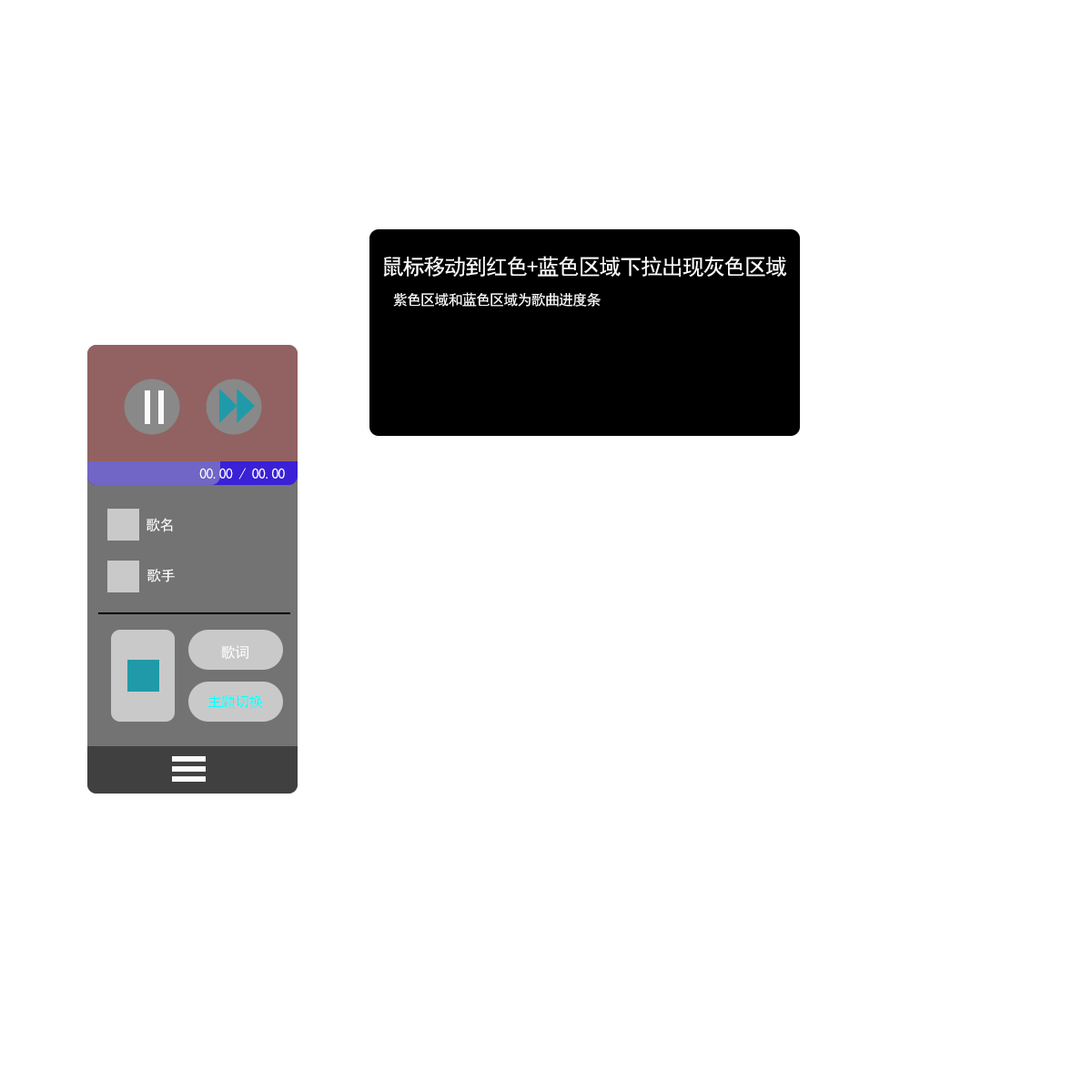
<style>
.page{position:relative;width:1092px;height:1092px;background:#ffffff}
.page>*{position:absolute;margin:0}
.t1{font:21.8px "SimHei";letter-spacing:-0.05em;color:#fdfdfd}
.t2{font:14.6px "SimHei";letter-spacing:-0.05em;color:#fdfdfd}
.t3{font:14.6px "SimHei";letter-spacing:-0.05em;color:#00ffff}
</style>
<div class="page">
<p class="t1" style="left:383px;top:256px;width:404px;height:21px">鼠标移动到红色+蓝色区域下拉出现灰色区域</p>
<p class="t2" style="left:393px;top:292px;width:208px;height:15px">紫色区域和蓝色区域为歌曲进度条</p>
<p class="t2" style="left:199px;top:468px;width:86px;height:12px">00.00 / 00.00</p>
<p class="t2" style="left:147px;top:518px;width:26px;height:14px">歌名</p>
<p class="t2" style="left:147px;top:569px;width:28px;height:13px">歌手</p>
<p class="t2" style="left:221px;top:645px;width:27px;height:14px">歌词</p>
<p class="t3" style="left:207px;top:694px;width:56px;height:14px">主题切换</p>
</div>
